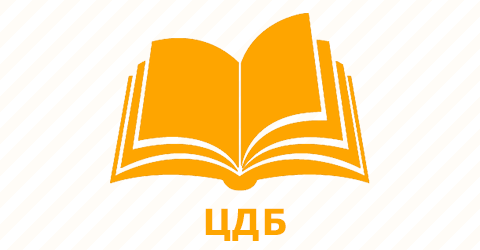
<style>
.page{position:relative;width:480px;height:250px;background:#fffcf7}
.page>*{position:absolute;margin:0}
.t1{font:36px "Tahoma-Bold";letter-spacing:0.05em;color:#fea500}
</style>
<div class="page">
<p class="t1" style="left:205px;top:208px;width:81px;height:33px">ЦДБ</p>
</div>
